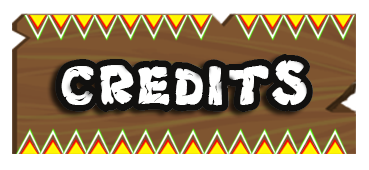
<style>
.page{position:relative;width:369px;height:170px;background:#ffffff}
.page>*{position:absolute;margin:0}
.t1{font:81.7px "Chlorinar";color:#11100f}
</style>
<div class="page">
<p class="t1" style="left:55px;top:54px;width:258px;height:58px">credits</p>
</div>
